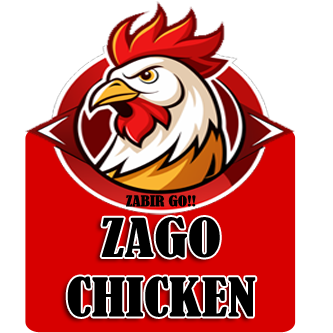
<style>
.page{position:relative;width:333px;height:333px;background:#ffffff}
.page>*{position:absolute;margin:0}
.t1{font:13.8px "BernardMT-Condensed";color:#000000;scale:1.25 1}
.t2{font:49.5px "BernardMT-Condensed";color:#000000;scale:1.25 1}
</style>
<div class="page">
<p class="t1" style="left:126px;top:195px;width:70px;height:12px">ZABIR GO!!</p>
<p class="t2" style="left:67px;top:217px;width:189px;height:100px;text-align:center">ZAGO<br>CHICKEN</p>
</div>
